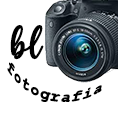
<style>
.page{position:relative;width:118px;height:118px;background:#ffffff}
.page>*{position:absolute;margin:0}
.t1{font:40px "HelloRegular";color:#010101;font-weight:bold}
.t2{font:16px "CourierNewPS-BoldMT";color:#000000}
</style>
<div class="page">
<p class="t1" style="left:10px;top:25px;width:34px;height:35px">bl</p>
<p class="t2" style="left:7px;top:62px;width:95px;height:40px;rotate:13deg">fotografia</p>
</div>
